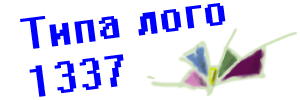
<style>
.page{position:relative;width:300px;height:100px;background:#ffffff}
.page>*{position:absolute;margin:0}
.t1{font:40px "System";color:#0000ff}
</style>
<div class="page">
<p class="t1" style="left:20px;top:3px;width:206px;height:94px;rotate:-7deg">Типа лого 1337</p>
</div>
